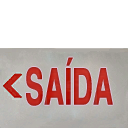
<style>
.page{position:relative;width:128px;height:128px;background:#ffffff}
.page>*{position:absolute;margin:0}
.t1{font:49.5px "Helvetica-Narrow-Bold";color:#b5271e;font-weight:bold;scale:0.68 1}
</style>
<div class="page">
<p class="t1" style="left:26px;top:57px;width:87px;height:49px">SAÍDA</p>
</div>
